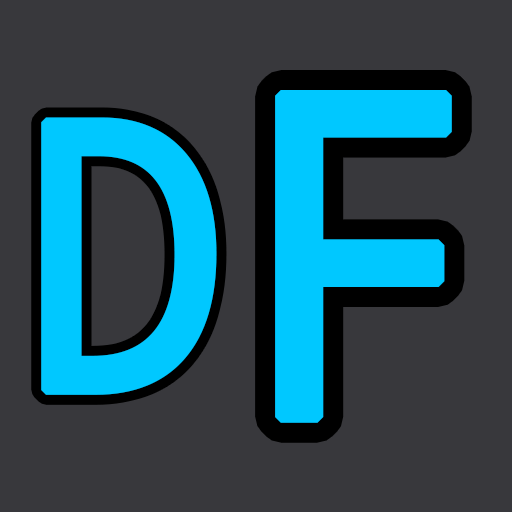
<style>
.page{position:relative;width:512px;height:512px;background:#38383c}
.page>*{position:absolute;margin:0}
.t1{font:450px "NotoMono";color:#00c8ff;font-weight:bold;scale:0.89 1}
.t2{font:375px "NotoMono";color:#00c8ff;font-weight:bold;scale:0.89 1}
</style>
<div class="page">
<p class="t1" style="left:275px;top:90px;width:177px;height:333px">F</p>
<p class="t2" style="left:41px;top:117px;width:176px;height:278px">D</p>
</div>
